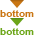
<style>
.page{position:relative;width:34px;height:35px;background:#ffffff}
.page>*{position:absolute;margin:0}
.t1{font:10px "Arial-BoldMT";color:#ca7613}
.t2{font:10px "Arial-BoldMT";color:#6ca619}
</style>
<div class="page">
<p class="t1" style="left:0px;top:10px;width:34px;height:7px">bottom</p>
<p class="t2" style="left:0px;top:28px;width:34px;height:7px">bottom</p>
</div>
